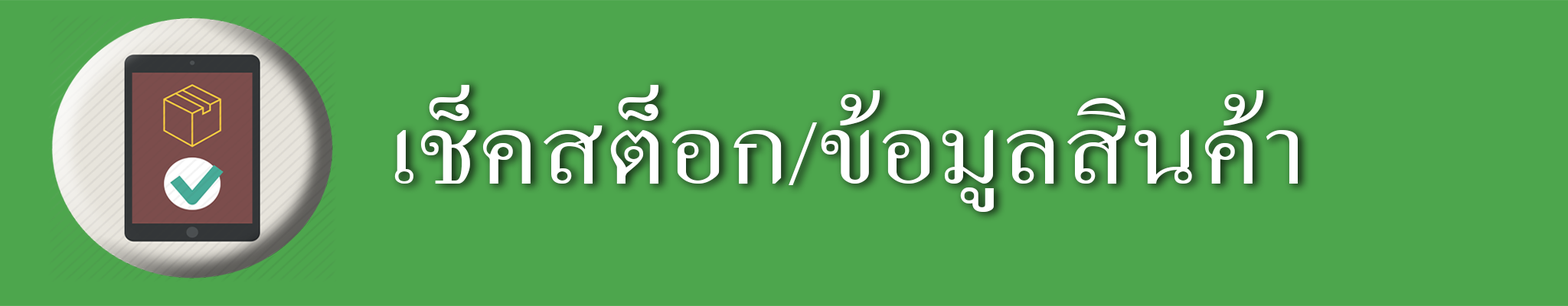
<style>
.page{position:relative;width:1568px;height:306px;background:#4da64d}
.page>*{position:absolute;margin:0}
.t1{font:134px "AngsanaNew";color:#ffffff;scale:1.14 1}
</style>
<div class="page">
<p class="t1" style="left:394px;top:84px;width:904px;height:128px">เช็คสต็อก/ข้อมูลสินค้า</p>
</div>
